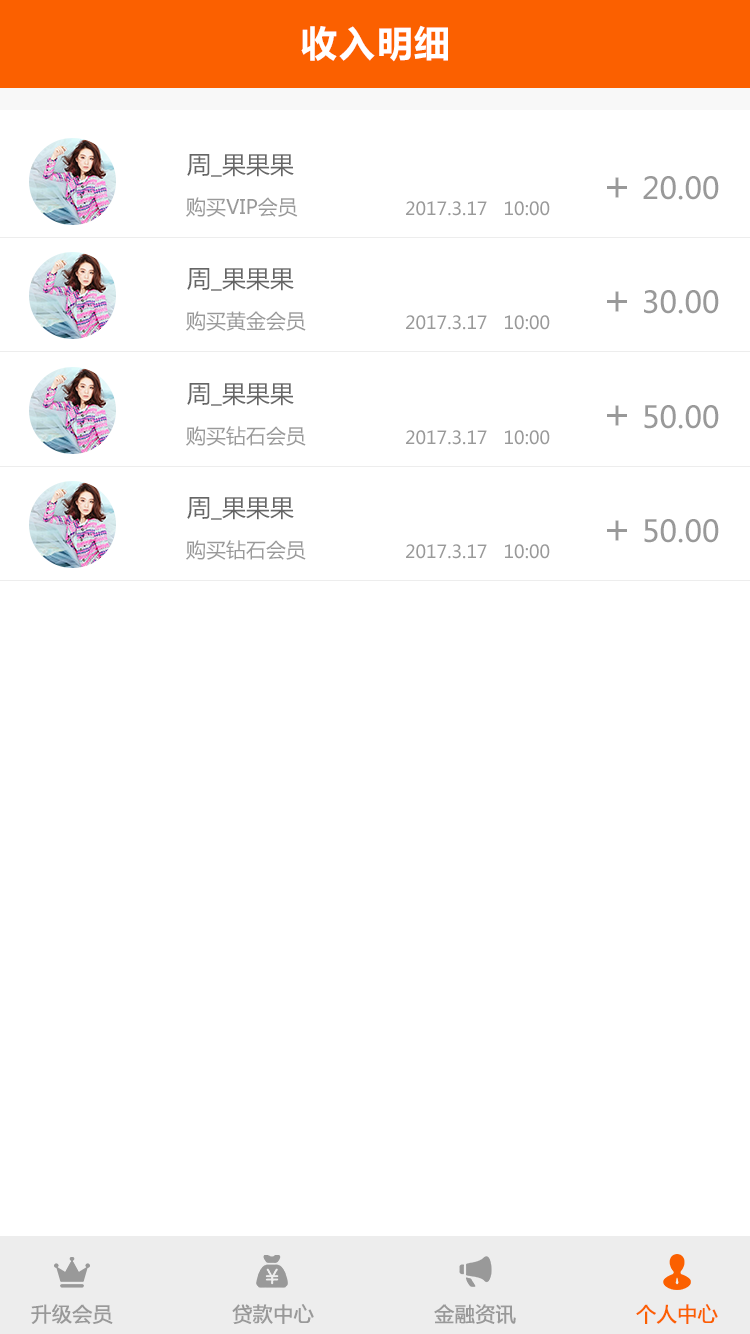
<style>
.page{position:relative;width:750px;height:1334px;background:#ffffff}
.page>*{position:absolute;margin:0}
.t1{font:36px "MicrosoftYaHei-Bold";letter-spacing:0.05em;color:#ffffff}
.t2{font:24px "MicrosoftYaHei";color:#666666}
.t3{font:40px "MicrosoftYaHei";color:#999999}
.t4{font:30px "MicrosoftYaHei";color:#999999}
.t5{font:20px "MicrosoftYaHei";color:#999999}
.t6{font:18px "MicrosoftYaHei";color:#999999}
.t7{font:20px "MicrosoftYaHei";color:#999999;font-weight:bold}
.t8{font:20px "MicrosoftYaHei";color:#fb6000;font-weight:bold}
</style>
<div class="page">
<p class="t1" style="left:301px;top:25px;width:147px;height:37px">收入明细</p>
<p class="t2" style="left:187px;top:154px;width:107px;height:23px">周_果果果</p>
<p class="t3" style="left:607px;top:177px;width:20px;height:21px">+</p>
<p class="t4" style="left:643px;top:176px;width:76px;height:24px">20.00</p>
<p class="t5" style="left:186px;top:197px;width:112px;height:20px">购买VIP会员</p>
<p class="t6" style="left:406px;top:201px;width:144px;height:15px">2017.3.17   10:00</p>
<p class="t2" style="left:187px;top:268px;width:107px;height:23px">周_果果果</p>
<p class="t3" style="left:607px;top:291px;width:20px;height:21px">+</p>
<p class="t4" style="left:644px;top:290px;width:75px;height:24px">30.00</p>
<p class="t5" style="left:186px;top:311px;width:120px;height:20px">购买黄金会员</p>
<p class="t6" style="left:406px;top:315px;width:144px;height:15px">2017.3.17   10:00</p>
<p class="t2" style="left:187px;top:383px;width:107px;height:23px">周_果果果</p>
<p class="t3" style="left:607px;top:405px;width:20px;height:21px">+</p>
<p class="t4" style="left:644px;top:405px;width:75px;height:24px">50.00</p>
<p class="t5" style="left:186px;top:426px;width:120px;height:20px">购买钻石会员</p>
<p class="t6" style="left:406px;top:430px;width:144px;height:15px">2017.3.17   10:00</p>
<p class="t2" style="left:187px;top:497px;width:107px;height:23px">周_果果果</p>
<p class="t3" style="left:607px;top:520px;width:20px;height:21px">+</p>
<p class="t4" style="left:644px;top:519px;width:75px;height:24px">50.00</p>
<p class="t5" style="left:186px;top:540px;width:120px;height:20px">购买钻石会员</p>
<p class="t6" style="left:406px;top:544px;width:144px;height:15px">2017.3.17   10:00</p>
<p class="t7" style="left:31px;top:1304px;width:82px;height:20px">升级会员</p>
<p class="t7" style="left:232px;top:1304px;width:82px;height:20px">贷款中心</p>
<p class="t7" style="left:434px;top:1304px;width:82px;height:20px">金融资讯</p>
<p class="t8" style="left:636px;top:1304px;width:82px;height:20px">个人中心</p>
</div>
